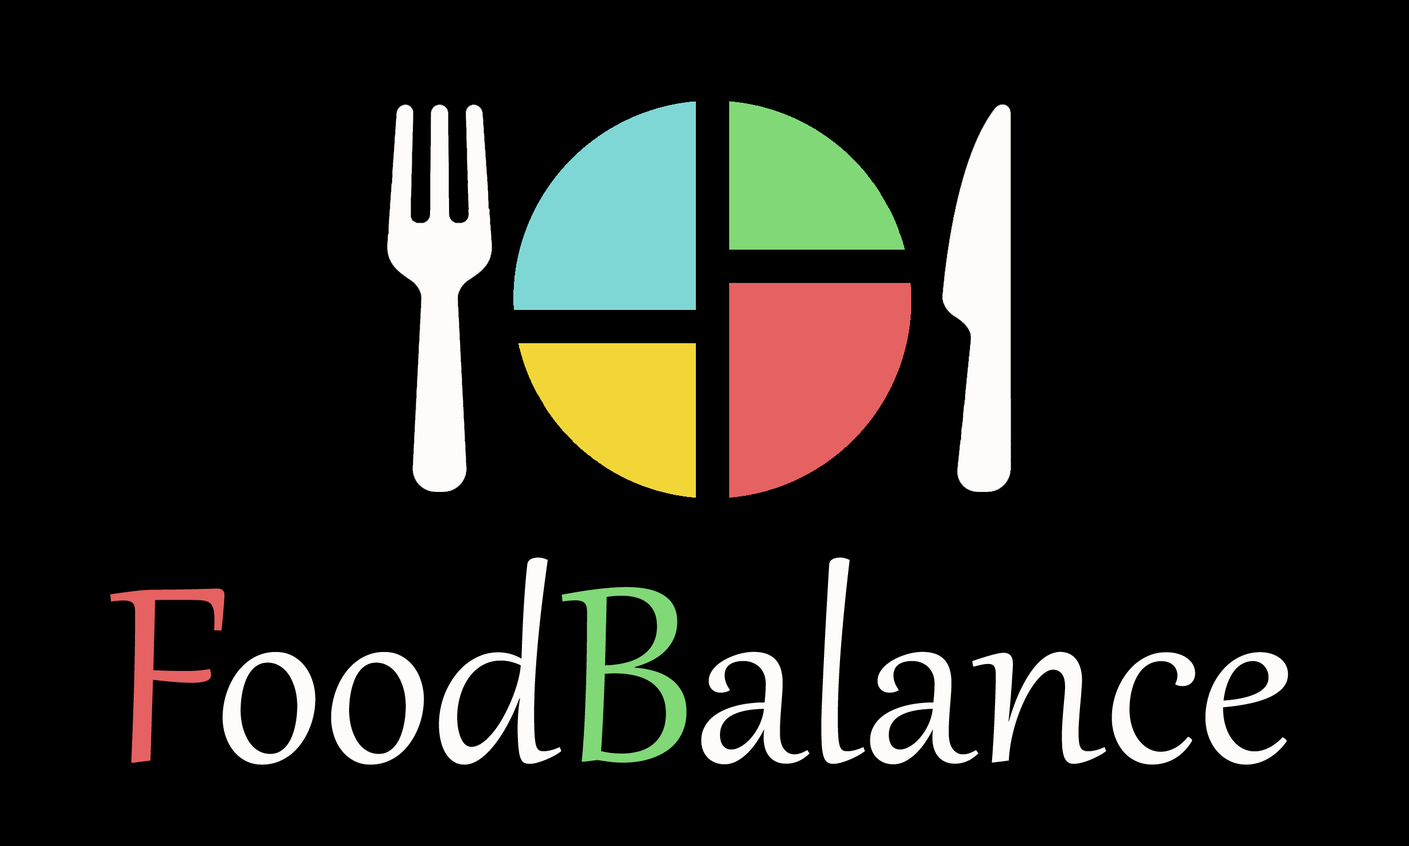
<style>
.page{position:relative;width:1409px;height:846px;background:#000000}
.page>*{position:absolute;margin:0}
.t1{font:306.2px "Gabriola";color:#fdfcfa}
.t2{font:306.2px "Gabriola";color:#e66161}
.t3{font:306.2px "Gabriola";color:#81d877}
</style>
<div class="page">
<p class="t1" style="left:110px;top:558px;width:1178px;height:207px"><span class="t2">F</span>ood<span class="t3">B</span>alance</p>
</div>
